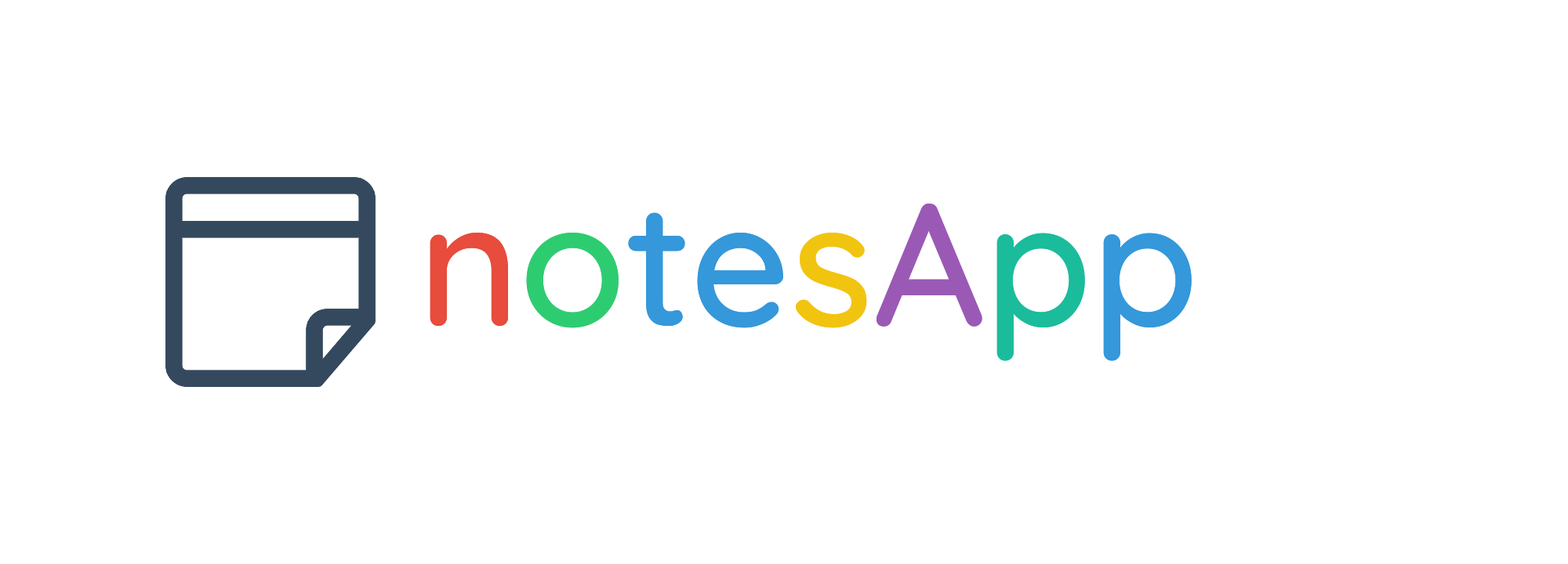
<style>
.page{position:relative;width:1568px;height:564px;background:#ffffff}
.page>*{position:absolute;margin:0}
.t1{font:174px "Quicksand-Medium";color:#3498db}
.t2{font:174px "Quicksand-Medium";color:#e74c3c}
.t3{font:174px "Quicksand-Medium";color:#2ecc71}
.t4{font:174px "Quicksand-Medium";color:#f1c40f}
.t5{font:174px "Quicksand-Medium";color:#9b59b6}
.t6{font:174px "Quicksand-Medium";color:#1abc9c}
</style>
<div class="page">
<p class="t1" style="left:430px;top:203px;width:762px;height:158px"><span class="t2">n</span><span class="t3">o</span>te<span class="t4">s</span><span class="t5">A</span><span class="t6">p</span>p</p>
</div>
